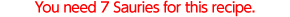
<style>
.page{position:relative;width:290px;height:17px;background:#ffffff}
.page>*{position:absolute;margin:0}
.t1{font:14px "UDShinGoPro-Medium";letter-spacing:-0.04em;color:#ff0000}
</style>
<div class="page">
<p class="t1" style="left:34px;top:0px;width:221px;height:17px">You need 7 Sauries for this recipe.</p>
</div>
